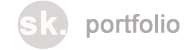
<style>
.page{position:relative;width:195px;height:50px;background:#ffffff}
.page>*{position:absolute;margin:0}
.t1{font:33.3px "Arial-BoldMT";color:#fdfaf9;font-weight:bold}
.t2{font:41.7px "Arial-BoldMT";color:#ddd9d7;font-weight:bold}
.t3{font:33.3px "Arial-BoldMT";color:#fefdfc;font-weight:bold}
.t4{font:25px "ArialMT";color:#aeaaa9;font-weight:bold}
.t5{font:25px "ArialMT";color:#eae6e4;font-weight:bold}
</style>
<div class="page">
<p class="t1" style="left:20px;top:10px;width:46px;height:26px"><span class="t2">      </span>sk<span class="t3">.</span></p>
<p class="t4" style="left:86px;top:14px;width:94px;height:24px"><span class="t5"> </span>portfolio</p>
</div>
